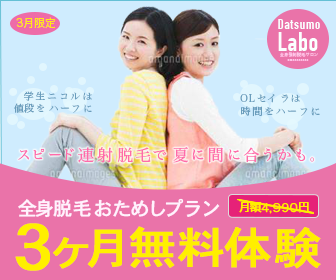
<style>
.page{position:relative;width:336px;height:280px;background:#cfecfe}
.page>*{position:absolute;margin:0}
.t1{font:11px "HiraKakuProN-W3";letter-spacing:-0.015em;color:#ffe817}
.t2{font:14px "DINCondensed-Bold";letter-spacing:0.07em;color:#fbffff;scale:0.97 1}
.t3{font:26px "DINCondensed-Bold";letter-spacing:0.02em;color:#fbffff}
.t4{font:4px "HiraKakuProN-W3";letter-spacing:0.07em;color:#ffc5e9}
.t5{font:3px "HiraKakuProN-W3";letter-spacing:0.07em;color:#ffc5e9}
.t6{font:10px "HiraMinProN-W3";letter-spacing:-0.015em;color:#6a9dbc}
.t7{font:11px "HiraMinProN-W3";letter-spacing:-0.015em;color:#6a9dbc}
.t8{font:14px "HiraMinProN-W3";letter-spacing:-0.015em;color:#ff6baa}
.t9{font:16px "HiraMinProN-W3";letter-spacing:-0.015em;color:#ff6baa}
.t10{font:19px "Osaka-Mono";letter-spacing:0.07em;color:#fff2fd;font-weight:bold}
.t11{font:44px "Osaka-Mono";letter-spacing:0.01em;color:#ffef00;font-weight:bold;scale:1.09 1}
.t12{font:64px "Osaka-Mono";letter-spacing:0.01em;color:#ffef00;font-weight:bold;scale:1.09 1}
</style>
<div class="page">
<p class="t1" style="left:16px;top:17px;width:39px;height:12px">3月限定</p>
<p class="t2" style="left:278px;top:19px;width:42px;height:10px">Datsumo</p>
<p class="t3" style="left:278px;top:32px;width:40px;height:19px">Labo</p>
<p class="t4" style="left:280px;top:52px;width:38px;height:5px">全身強制脱毛サロン</p>
<p class="t5" style="left:287px;top:59px;width:22px;height:2px">aaaaaaaaaaa</p>
<p class="t6" style="left:14px;top:91px;width:78px;height:22px"><span class="t7">   </span>学生ニコルは<br> 　値段をハーフに</p>
<p class="t6" style="left:240px;top:93px;width:80px;height:24px">OLセイラは<br>　時間をハーフに</p>
<p class="t8" style="left:18px;top:147px;width:296px;height:16px">スピード<span class="t9">連射脱毛</span>で<span class="t9">夏</span>に<span class="t9">間</span>に<span class="t9">合</span>うかも。</p>
<p class="t10" style="left:18px;top:198px;width:202px;height:20px">全身脱毛おためしプラン</p>
<p class="t11" style="left:15px;top:223px;width:306px;height:48px"><span class="t12">３</span>ヶ月無料体験</p>
</div>
